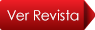
<style>
.page{position:relative;width:95px;height:30px}
.page>*{position:absolute;margin:0}
.t1{font:13.9px "CenturyGothic";color:#ffffff}
</style>
<div class="page">
<p class="t1" style="left:7px;top:9px;width:72px;height:12px">Ver Revista</p>
</div>
